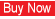
<style>
.page{position:relative;width:55px;height:19px;background:#ed1c24}
.page>*{position:absolute;margin:0}
.t1{font:13.5px "ArialMT";color:#ffffff;scale:0.89 1}
</style>
<div class="page">
<p class="t1" style="left:4px;top:2px;width:47px;height:14px">Buy Now</p>
</div>
